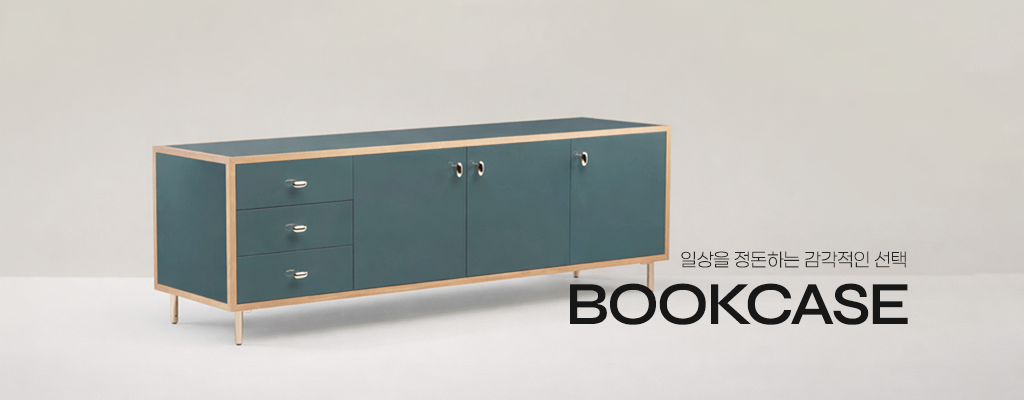
<style>
.page{position:relative;width:1024px;height:400px}
.page>*{position:absolute;margin:0}
.t1{font:18.8px "Paperlogy-2ExtraLight";color:#242424}
.t2{font:61px "Syne-SemiBold";letter-spacing:-0.04em;color:#171717}
</style>
<div class="page">
<p class="t1" style="left:681px;top:251px;width:225px;height:17px">일상을 정돈하는 감각적인 선택</p>
<p class="t2" style="left:570px;top:283px;width:338px;height:42px">BOOKCASE</p>
</div>
